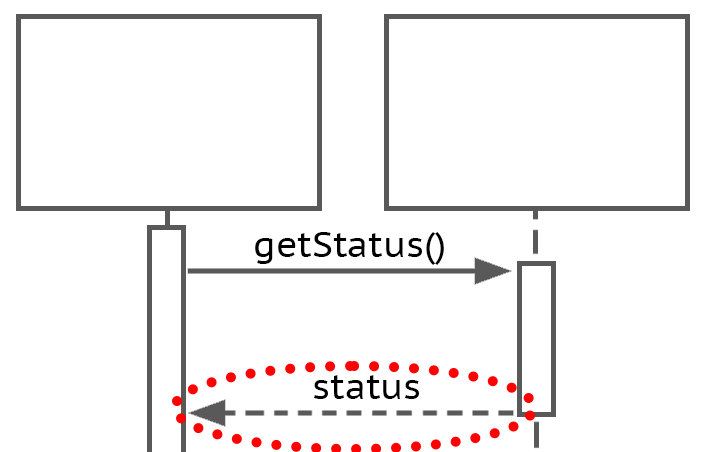
<style>
.page{position:relative;width:706px;height:452px;background:#ffffff}
.page>*{position:absolute;margin:0}
.t1{font:36px "PTSans-Caption";color:#000000}
</style>
<div class="page">
<p class="t1" style="left:255px;top:232px;width:189px;height:33px">getStatus()</p>
<p class="t1" style="left:314px;top:375px;width:105px;height:24px">status</p>
</div>
